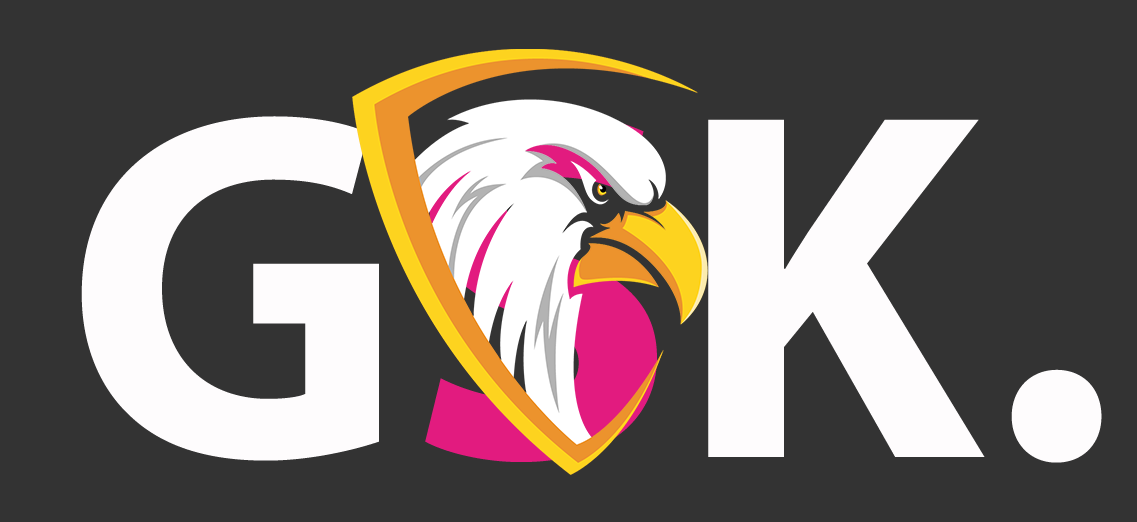
<style>
.page{position:relative;width:1137px;height:522px;background:#333333}
.page>*{position:absolute;margin:0}
.t1{font:500px "MyriadPro-Bold";color:#fefcfd}
.t2{font:500px "MyriadPro-Bold";color:#e21b7f}
</style>
<div class="page">
<p class="t1" style="left:81px;top:114px;width:1021px;height:349px">G<span class="t2">S</span>K.,.kK</p>
</div>
